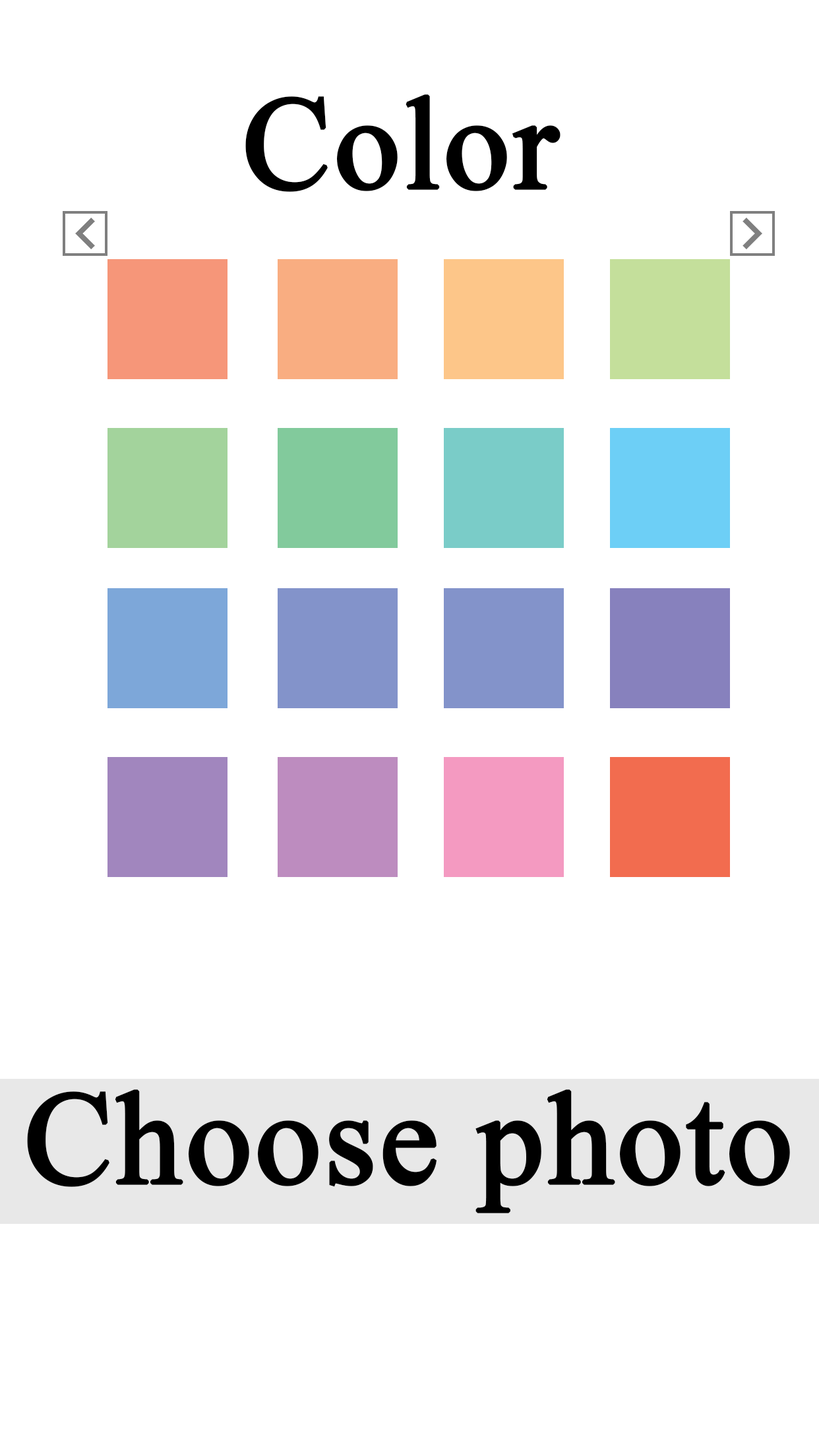
<style>
.page{position:relative;width:819px;height:1456px;background:#ffffff}
.page>*{position:absolute;margin:0}
.t1{font:131.9px "TimesNewRomanPSMT";color:#000000;font-weight:bold}
</style>
<div class="page">
<p class="t1" style="left:245px;top:94px;width:315px;height:98px">Color</p>
<p class="t1" style="left:27px;top:1089px;width:763px;height:124px">Choose photo</p>
</div>
